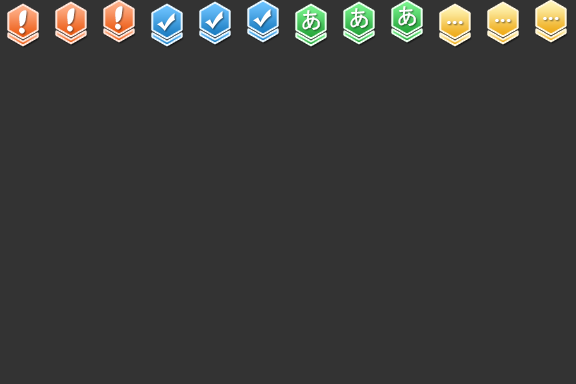
<style>
.page{position:relative;width:576px;height:384px;background:#333333}
.page>*{position:absolute;margin:0}
.t1{font:28px "JapaneseBrush";color:#ffffff}
.t2{font:22px "MS-Gothic";color:#ffffff}
.t3{font:22px "";letter-spacing:0.04em;color:#ffffff}
</style>
<div class="page">
<p class="t1" style="left:115px;top:6px;width:8px;height:24px;rotate:-17deg">!</p>
<p class="t2" style="left:398px;top:6px;width:18px;height:20px">あ</p>
<p class="t1" style="left:19px;top:10px;width:8px;height:24px;rotate:-17deg">!</p>
<p class="t1" style="left:67px;top:8px;width:8px;height:24px;rotate:-17deg">!</p>
<p class="t2" style="left:302px;top:10px;width:18px;height:20px">あ</p>
<p class="t2" style="left:350px;top:8px;width:18px;height:20px">あ</p>
<p class="t3" style="left:543px;top:17px;width:16px;height:3px">...</p>
<p class="t3" style="left:447px;top:21px;width:16px;height:3px">...</p>
<p class="t3" style="left:495px;top:19px;width:16px;height:3px">...</p>
</div>
